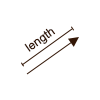
<style>
.page{position:relative;width:100px;height:100px;background:#ffffff}
.page>*{position:absolute;margin:0}
.t1{font:12px "Helvetica";color:#331707}
</style>
<div class="page">
<p class="t1" style="left:24px;top:28px;width:32px;height:24px;rotate:-35deg">length</p>
</div>
